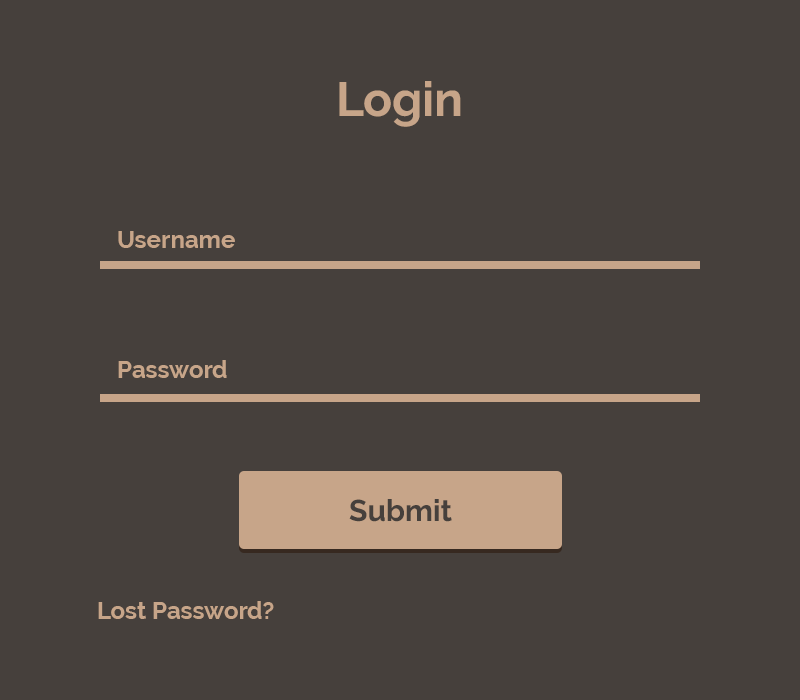
<style>
.page{position:relative;width:800px;height:700px;background:#46403c}
.page>*{position:absolute;margin:0}
.t1{font:48px "Raleway-Bold";color:#c7a589}
.t2{font:24px "Raleway-Bold";color:#c7a589}
.t3{font:30px "Raleway-Bold";color:#46403c}
</style>
<div class="page">
<p class="t1" style="left:339px;top:81px;width:122px;height:46px">Login</p>
<p class="t2" style="left:118px;top:231px;width:117px;height:17px">Username</p>
<p class="t2" style="left:118px;top:360px;width:109px;height:18px">Password</p>
<p class="t3" style="left:349px;top:499px;width:103px;height:23px">Submit</p>
<p class="t2" style="left:98px;top:601px;width:176px;height:18px">Lost Password?</p>
</div>
